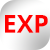
<style>
.page{position:relative;width:50px;height:50px}
.page>*{position:absolute;margin:0}
.t1{font:25px "OpenSans-Bold";color:#ff0000}
</style>
<div class="page">
<p class="t1" style="left:5px;top:15px;width:43px;height:18px">EXP</p>
</div>
